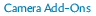
<style>
.page{position:relative;width:96px;height:16px;background:#ffffff}
.page>*{position:absolute;margin:0}
.t1{font:12px "Amira-Light";color:#0082bb}
</style>
<div class="page">
<p class="t1" style="left:4px;top:3px;width:87px;height:10px">Camera Add-Ons</p>
</div>
